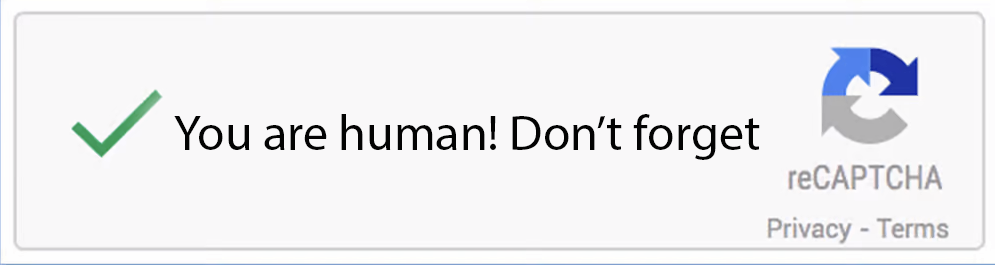
<style>
.page{position:relative;width:995px;height:265px;background:#f9f8f9}
.page>*{position:absolute;margin:0}
.t1{font:50px "MyriadPro-Regular";color:#030303}
</style>
<div class="page">
<p class="t1" style="left:174px;top:114px;width:586px;height:46px">You are human! Don’t forget</p>
</div>
